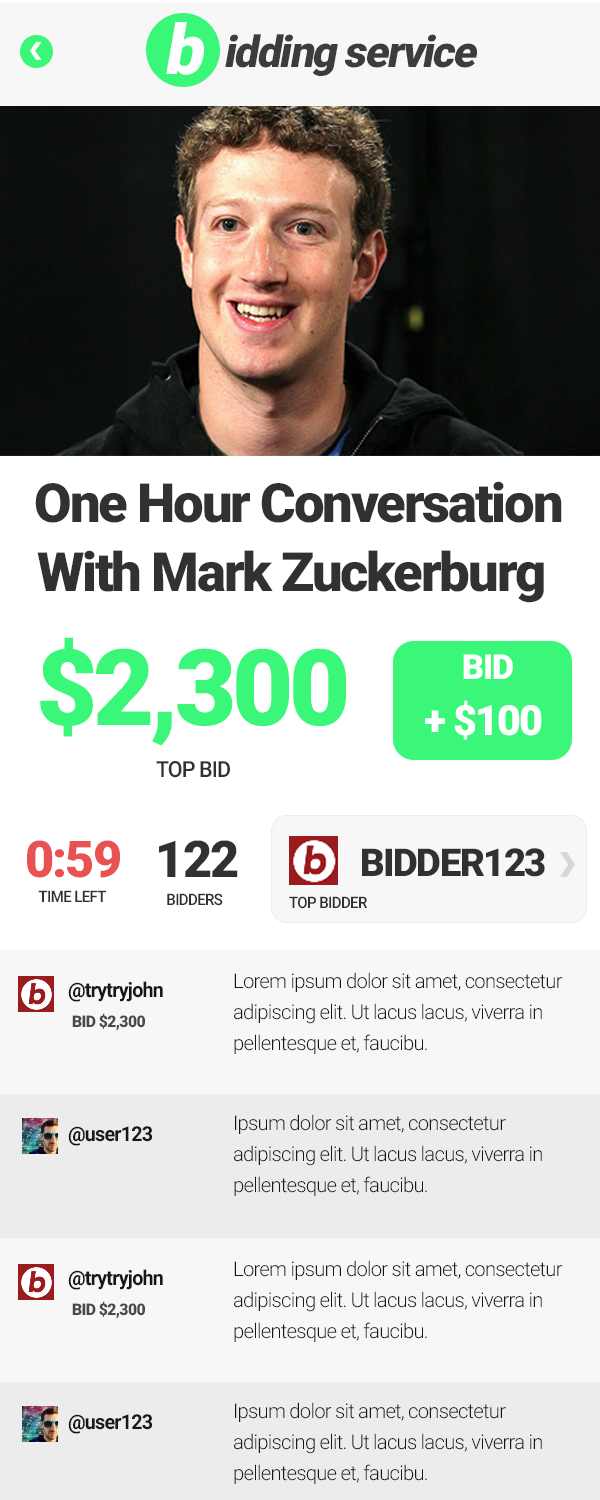
<style>
.page{position:relative;width:600px;height:1500px;background:#f7f7f7}
.page>*{position:absolute;margin:0}
.t1{font:69.3px "Roboto-Black";letter-spacing:-0.06em;color:#ffffff;font-style:italic}
.t2{font:43.5px "Roboto-Black";letter-spacing:-0.04em;color:#3c3c3c;font-style:italic}
.t3{font:54.1px "Roboto-Black";letter-spacing:-0.04em;color:#313131}
.t4{font:105.6px "Roboto-Black";letter-spacing:-0.04em;color:#3bf779}
.t5{font:34.4px "Roboto-Black";letter-spacing:-0.04em;color:#ffffff}
.t6{font:41.8px "Roboto-Black";letter-spacing:-0.04em;color:#ffffff}
.t7{font:22.2px "Roboto-Medium";letter-spacing:-0.04em;color:#313131;scale:0.96 1}
.t8{font:50.7px "Roboto-Black";letter-spacing:-0.04em;color:#e95252}
.t9{font:50.7px "Roboto-Black";letter-spacing:-0.04em;color:#313131}
.t10{font:38.6px "Roboto-Black";letter-spacing:-0.04em;color:#313131}
.t11{font:15.7px "Roboto-Medium";letter-spacing:-0.04em;color:#313131;scale:0.96 1}
.t12{font:20.4px/31px "Roboto-Light";letter-spacing:-0.04em;color:#171717}
.t13{font:20.4px "Roboto-Bold";letter-spacing:-0.04em;color:#171717;scale:0.96 1}
.t14{font:16px "Roboto-Black";letter-spacing:-0.04em;color:#4a4a4a}
</style>
<div class="page">
<p class="t1" style="left:166px;top:22px;width:38px;height:53px">b</p>
<p class="t2" style="left:225px;top:34px;width:252px;height:42px">idding service</p>
<p class="t3" style="left:35px;top:481px;width:527px;height:42px">One Hour Conversation</p>
<p class="t3" style="left:37px;top:550px;width:507px;height:53px">With Mark Zuckerburg</p>
<p class="t4" style="left:40px;top:637px;width:306px;height:109px">$2,300</p>
<p class="t5" style="left:463px;top:654px;width:50px;height:25px">BID</p>
<p class="t6" style="left:425px;top:700px;width:117px;height:40px">+ $100</p>
<p class="t7" style="left:156px;top:761px;width:74px;height:17px">TOP BID</p>
<p class="t8" style="left:27px;top:840px;width:93px;height:38px">0:59</p>
<p class="t9" style="left:159px;top:840px;width:79px;height:37px">122</p>
<p class="t10" style="left:362px;top:848px;width:183px;height:29px">BIDDER123</p>
<p class="t11" style="left:38px;top:890px;width:68px;height:12px">TIME LEFT</p>
<p class="t11" style="left:167px;top:893px;width:56px;height:13px">BIDDERS</p>
<p class="t11" style="left:289px;top:896px;width:78px;height:13px">TOP BIDDER</p>
<p class="t12" style="left:234px;top:972px;width:329px;height:82px">Lorem ipsum dolor sit amet, consectetur <br>adipiscing elit. Ut lacus lacus, viverra in pellentesque et, faucibu.</p>
<p class="t13" style="left:68px;top:981px;width:95px;height:21px">@trytryjohn</p>
<p class="t14" style="left:72px;top:1013px;width:73px;height:17px">BID $2,300</p>
<p class="t12" style="left:234px;top:1114px;width:308px;height:82px">Ipsum dolor sit amet, consectetur <br>adipiscing elit. Ut lacus lacus, viverra in pellentesque et, faucibu.</p>
<p class="t13" style="left:68px;top:1126px;width:84px;height:20px">@user123</p>
<p class="t12" style="left:234px;top:1260px;width:329px;height:82px">Lorem ipsum dolor sit amet, consectetur <br>adipiscing elit. Ut lacus lacus, viverra in pellentesque et, faucibu.</p>
<p class="t12" style="left:234px;top:1260px;width:329px;height:82px">Lorem ipsum dolor sit amet, consectetur <br>adipiscing elit. Ut lacus lacus, viverra in pellentesque et, faucibu.</p>
<p class="t13" style="left:68px;top:1269px;width:95px;height:21px">@trytryjohn</p>
<p class="t14" style="left:72px;top:1301px;width:73px;height:17px">BID $2,300</p>
<p class="t12" style="left:234px;top:1402px;width:308px;height:82px">Ipsum dolor sit amet, consectetur <br>adipiscing elit. Ut lacus lacus, viverra in pellentesque et, faucibu.</p>
<p class="t13" style="left:68px;top:1414px;width:84px;height:20px">@user123</p>
</div>
